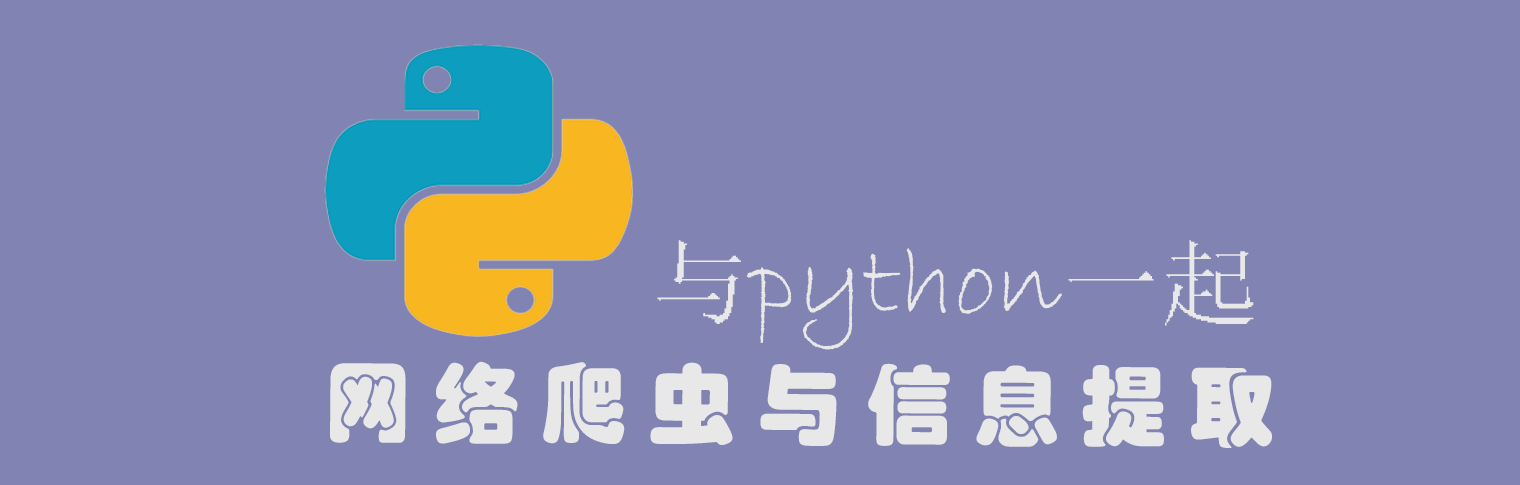
<style>
.page{position:relative;width:1520px;height:485px;background:#8184b3}
.page>*{position:absolute;margin:0}
.t1{font:99.1px "BradleyHandITC";color:#e8e8e8;scale:1.06 1}
.t2{font:99.1px "Terminal";color:#e8e8e8;scale:1.06 1}
.t3{font:87.4px "STHupo";color:#e8e8e8}
</style>
<div class="page">
<p class="t1" style="left:657px;top:240px;width:597px;height:110px"><span class="t2">与</span>python<span class="t2">一起</span></p>
<p class="t3" style="left:330px;top:361px;width:942px;height:87px">网 络 爬 虫 与 信 息 提 取</p>
</div>
